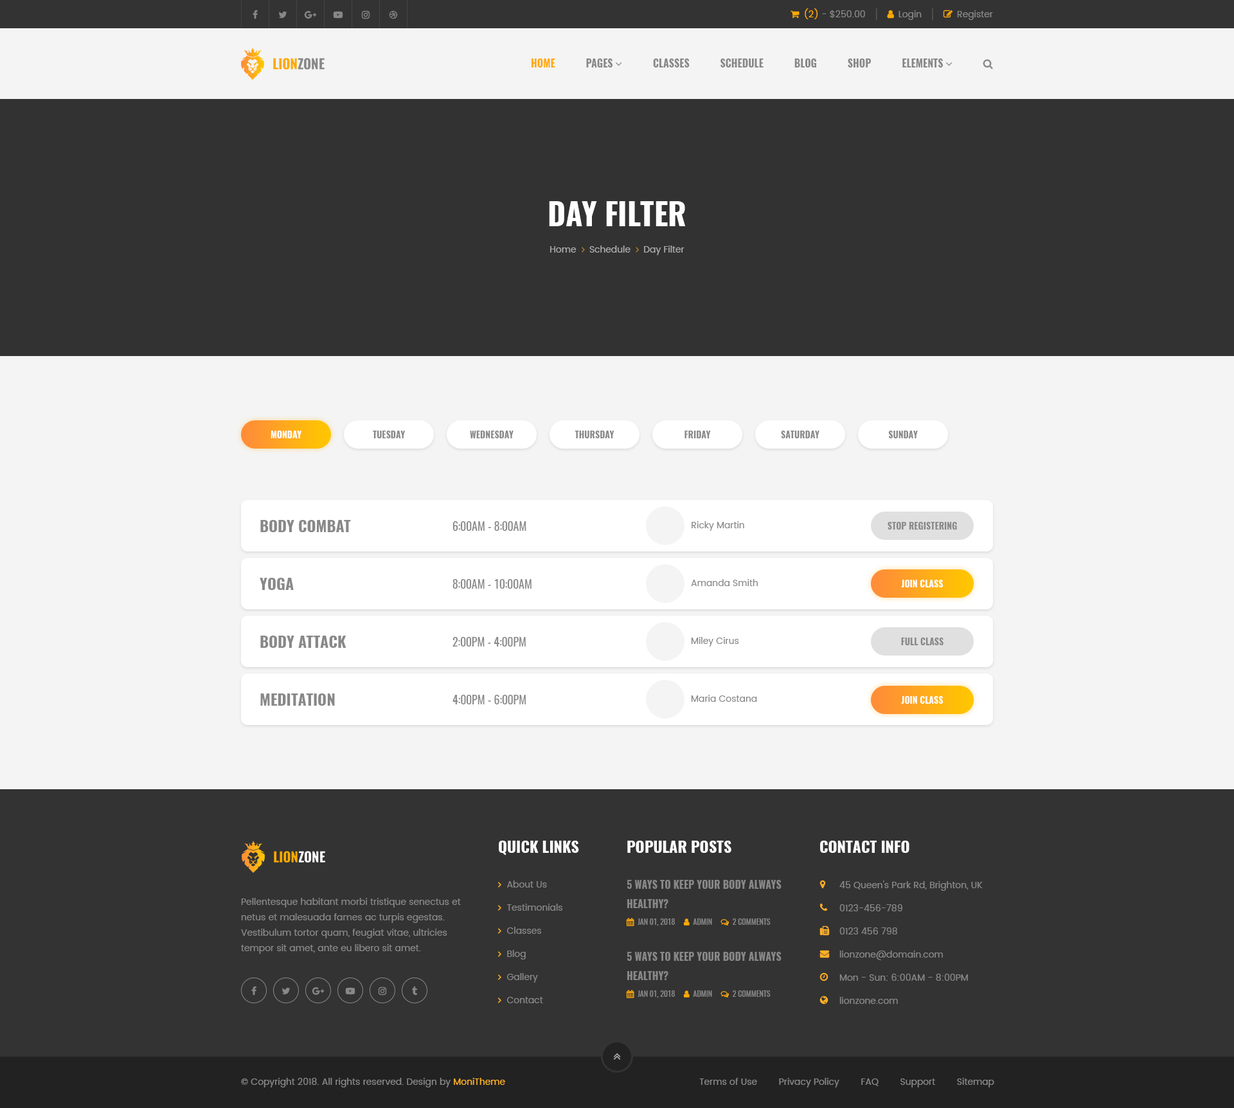
<style>
.page{position:relative;width:1234px;height:1108px;background:#f4f4f4}
.page>*{position:absolute;margin:0}
.t1{font:30.9px "Oswald-Bold";color:#ffffff;text-transform:uppercase}
.t2{font:9px "Oswald-Bold";color:#ffffff;text-transform:uppercase}
.t3{font:9px "Oswald-Bold";color:#888888;text-transform:uppercase}
.t4{font:15.4px "Oswald-Bold";color:#888888;text-transform:uppercase}
.t5{font:11.6px "Oswald-Regular";color:#888888;text-transform:uppercase}
.t6{font:9px "Poppins-Regular";color:#888888}
.t7{font:15.4px "Oswald-Bold";color:#ffffff;text-transform:uppercase}
.t8{font:9px/23.1px "Poppins-Regular";color:#888888}
.t9{font:9px/15.4px "Poppins-Regular";color:#888888}
.t10{font:9px "Poppins-Regular";color:#ffb027}
</style>
<div class="page">
<p class="t1" style="left:549px;top:201px;width:137px;height:25px">day filter</p>
<p class="t2" style="left:271px;top:431px;width:31px;height:7px">monday</p>
<p class="t3" style="left:373px;top:431px;width:32px;height:7px">tuesday</p>
<p class="t3" style="left:470px;top:431px;width:44px;height:7px">wednesday</p>
<p class="t3" style="left:575px;top:431px;width:40px;height:7px">thursday</p>
<p class="t3" style="left:685px;top:431px;width:26px;height:7px">friday</p>
<p class="t3" style="left:781px;top:431px;width:39px;height:7px">saturday</p>
<p class="t3" style="left:888px;top:431px;width:30px;height:7px">sunday</p>
<p class="t4" style="left:260px;top:520px;width:91px;height:12px">body combat</p>
<p class="t5" style="left:453px;top:521px;width:73px;height:10px">6:00am - 8:00am</p>
<p class="t6" style="left:692px;top:521px;width:52px;height:10px">Ricky Martin</p>
<p class="t3" style="left:888px;top:522px;width:69px;height:8px">stop registering</p>
<p class="t4" style="left:260px;top:578px;width:34px;height:12px">yoga</p>
<p class="t5" style="left:453px;top:579px;width:79px;height:10px">8:00am - 10:00am</p>
<p class="t6" style="left:691px;top:579px;width:67px;height:7px">Amanda Smith</p>
<p class="t2" style="left:901px;top:580px;width:43px;height:8px">join class</p>
<p class="t4" style="left:260px;top:636px;width:86px;height:12px">body attack</p>
<p class="t5" style="left:453px;top:637px;width:73px;height:10px">2:00pm - 4:00pm</p>
<p class="t6" style="left:691px;top:637px;width:48px;height:10px">Miley Cirus</p>
<p class="t3" style="left:901px;top:638px;width:43px;height:7px">full class</p>
<p class="t4" style="left:260px;top:694px;width:75px;height:12px">meditation</p>
<p class="t5" style="left:453px;top:695px;width:73px;height:10px">4:00pm - 6:00pm</p>
<p class="t6" style="left:691px;top:695px;width:66px;height:7px">Maria Costana</p>
<p class="t2" style="left:901px;top:696px;width:43px;height:8px">join class</p>
<p class="t7" style="left:499px;top:841px;width:80px;height:15px">quick links</p>
<p class="t7" style="left:627px;top:841px;width:105px;height:12px">popular posts</p>
<p class="t7" style="left:820px;top:841px;width:90px;height:12px">contact info</p>
<p class="t8" style="left:840px;top:881px;width:143px;height:123px">45 Queen's Park Rd, Brighton, UK<br>0123-456-789<br>0123 456 798<br>lionzone@domain.com<br>Mon - Sun: 6:00AM - 8:00PM<br>lionzone.com</p>
<p class="t9" style="left:241px;top:898px;width:220px;height:56px">Pellentesque habitant morbi tristique senectus et netus et malesuada fames ac turpis egestas. Vestibulum tortor quam, feugiat vitae, ultricies tempor sit amet, ante eu libero sit amet.</p>
<p class="t6" style="left:241px;top:1078px;width:264px;height:10px">© Copyright 2018. All rights reserved. Design by <span class="t10">MoniTheme</span></p>
<p class="t6" style="left:699px;top:1078px;width:296px;height:10px">Terms of Use        Privacy Policy        FAQ        Support        Sitemap</p>
</div>
